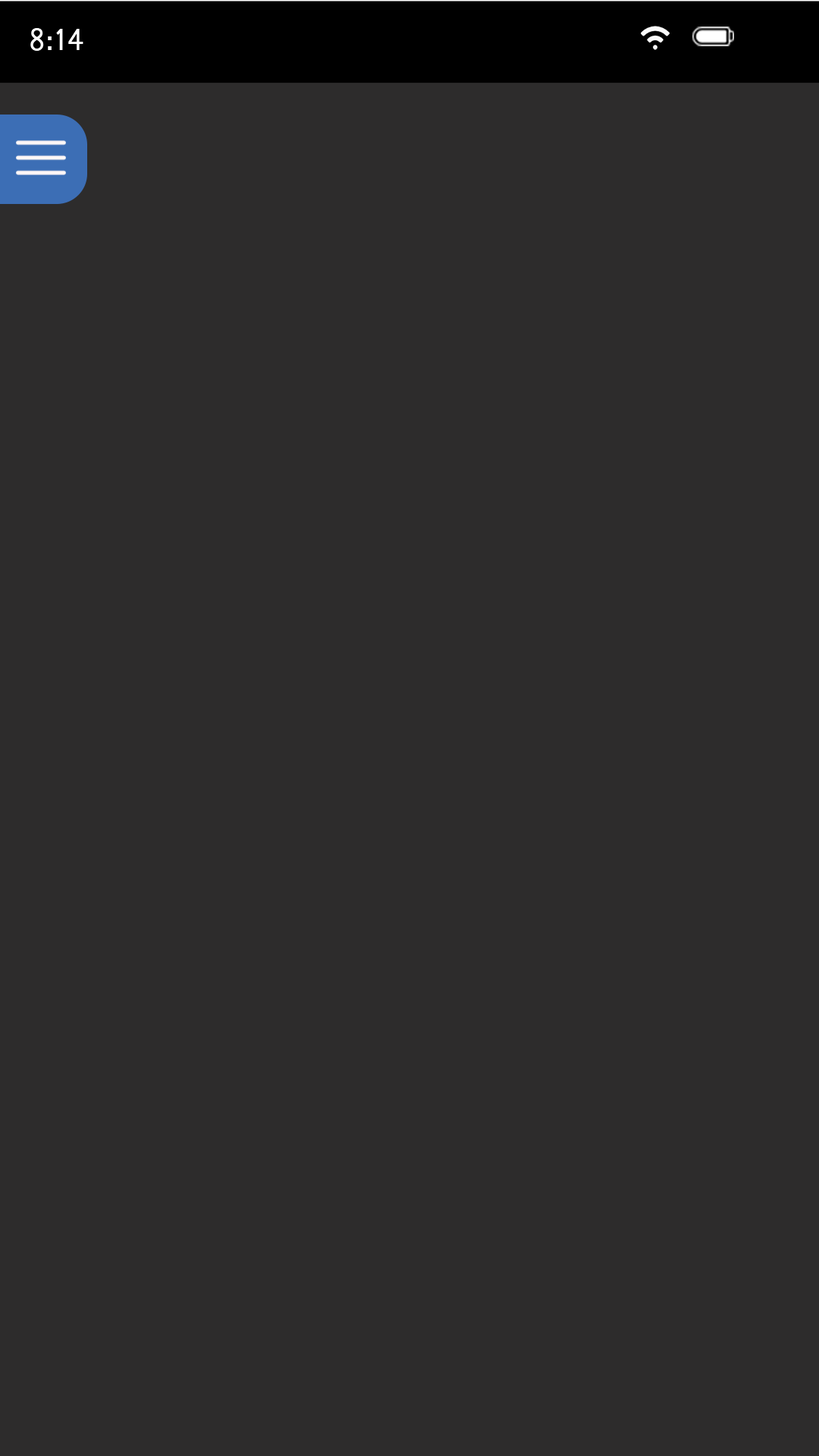
<style>
.page{position:relative;width:819px;height:1456px;background:#2d2c2c}
.page>*{position:absolute;margin:0}
.t1{font:32.7px "Shruti";color:#ffffff;scale:0.94 1}
</style>
<div class="page">
<p class="t1" style="left:30px;top:28px;width:53px;height:23px">8:14</p>
</div>
